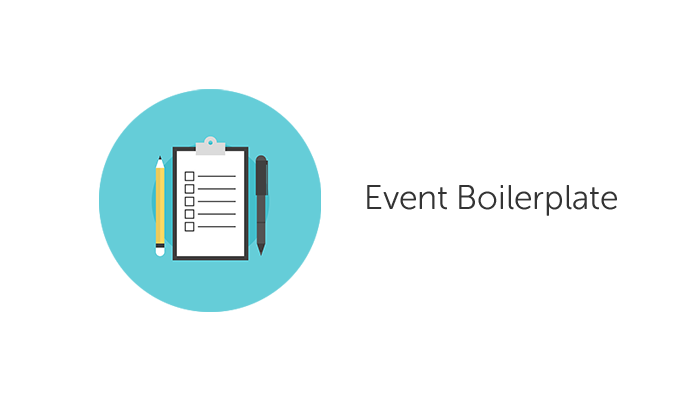
<style>
.page{position:relative;width:700px;height:400px;background:#ffffff}
.page>*{position:absolute;margin:0}
.t1{font:34px "MuseoSansRounded-300";color:#333333}
</style>
<div class="page">
<p class="t1" style="left:367px;top:185px;width:250px;height:31px">Event Boilerplate</p>
</div>
